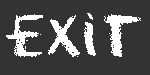
<style>
.page{position:relative;width:150px;height:75px;background:#333333}
.page>*{position:absolute;margin:0}
.t1{font:53.3px "Eraser-Regular";color:#ffffff;scale:1.11 1}
</style>
<div class="page">
<p class="t1" style="left:6px;top:13px;width:135px;height:44px">exit</p>
</div>
